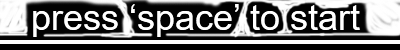
<style>
.page{position:relative;width:400px;height:50px;background:#010101}
.page>*{position:absolute;margin:0}
.t1{font:36px "ArialMT";color:#ffffff}
</style>
<div class="page">
<p class="t1" style="left:33px;top:4px;width:327px;height:33px">press ‘space’ to start</p>
</div>
